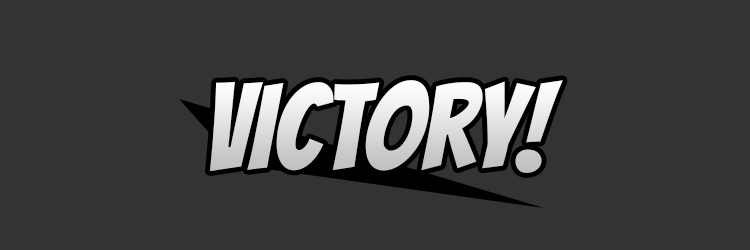
<style>
.page{position:relative;width:750px;height:250px;background:#333333}
.page>*{position:absolute;margin:0}
.t1{font:120px "Bangers-Regular"}
</style>
<div class="page">
<p class="t1" style="left:210px;top:80px;width:353px;height:93px">Victory!</p>
</div>
